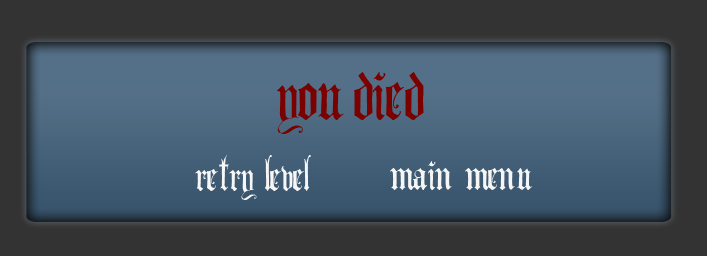
<style>
.page{position:relative;width:707px;height:256px;background:#333333}
.page>*{position:absolute;margin:0}
.t1{font:100px "AngloText";color:#7b0000}
.t2{font:60px "AngloText";color:#f6f6f6}
</style>
<div class="page">
<p class="t1" style="left:277px;top:72px;width:147px;height:62px">you died</p>
<p class="t2" style="left:195px;top:155px;width:116px;height:45px">retry level</p>
<p class="t2" style="left:390px;top:161px;width:143px;height:29px">main menu</p>
</div>
